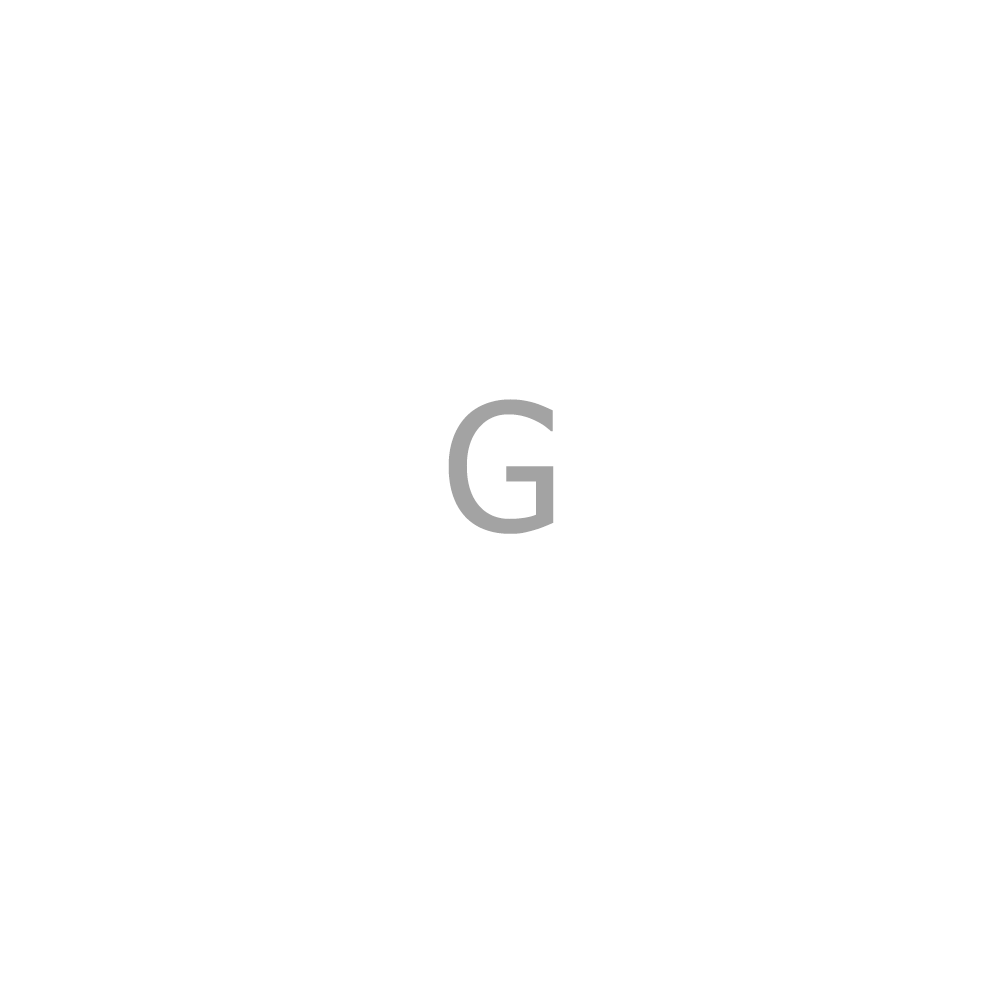
<style>
.page{position:relative;width:1000px;height:1000px;background:#ffffff}
.page>*{position:absolute;margin:0}
.t1{font:177.8px "Tahoma";color:#a3a3a3}
</style>
<div class="page">
<p class="t1" style="left:448px;top:399px;width:106px;height:135px">G</p>
</div>
